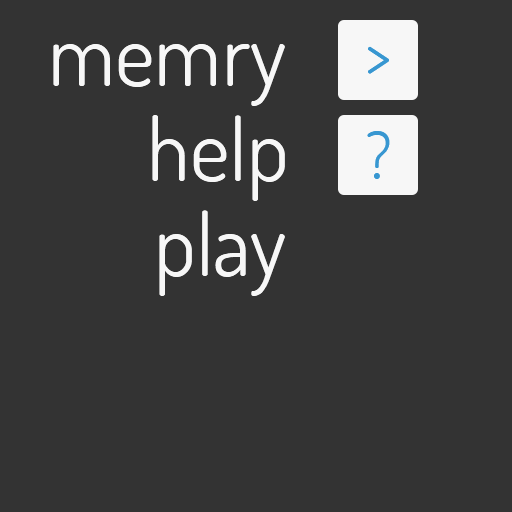
<style>
.page{position:relative;width:512px;height:512px;background:#333333}
.page>*{position:absolute;margin:0}
.t1{font:86px "Dosis-Regular";color:#f7f7f7}
</style>
<div class="page">
<p class="t1" style="left:53px;top:44px;width:232px;height:62px">memry</p>
<p class="t1" style="left:152px;top:115px;width:133px;height:86px">help</p>
<p class="t1" style="left:159px;top:210px;width:126px;height:86px">play</p>
</div>
